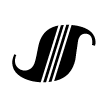
<style>
.page{position:relative;width:108px;height:103px;background:#ffffff}
.page>*{position:absolute;margin:0}
.t1{font:72px "SlamBangTheaterNF";color:#000000}
.t2{font:72px "NordExpressNF";color:#000000}
</style>
<div class="page">
<p class="t1" style="left:12px;top:24px;width:84px;height:59px"><span class="t2"><br></span>S</p>
</div>
